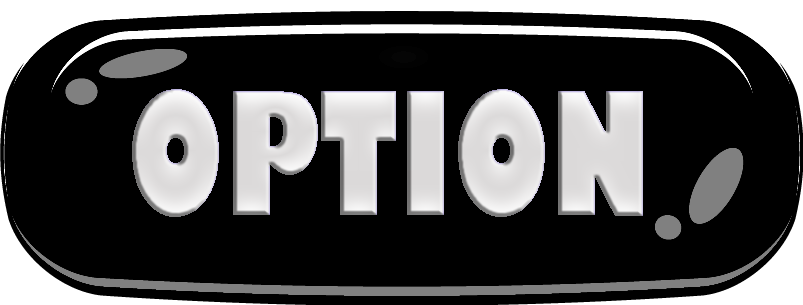
<style>
.page{position:relative;width:803px;height:305px;background:#000000}
.page>*{position:absolute;margin:0}
.t1{font:167px "GillSans-UltraBoldCondensed";color:#dedcdd}
</style>
<div class="page">
<p class="t1" style="left:132px;top:89px;width:511px;height:128px">OPTION</p>
</div>
